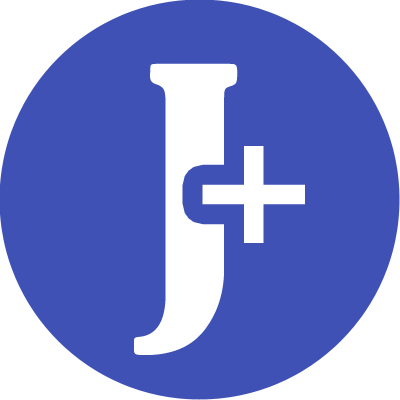
<style>
.page{position:relative;width:400px;height:400px;background:#3f51b5}
.page>*{position:absolute;margin:0}
.t1{font:320px "BernardMT-Condensed";color:#ffffff}
.t2{font:230px "LeagueGothic-Regular";color:#ffffff}
</style>
<div class="page">
<p class="t1" style="left:134px;top:63px;width:104px;height:292px">J</p>
<p class="t2" style="left:202px;top:146px;width:103px;height:97px">+</p>
</div>
